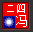
<style>
.page{position:relative;width:33px;height:32px;background:#f20000}
.page>*{position:absolute;margin:0}
.t1{font:10.4px "SimSun";color:#ffffff}
.t2{font:11.7px "SimSun";color:#ffffff}
</style>
<div class="page">
<p class="t1" style="left:7px;top:4px;width:18px;height:9px">二四</p>
<p class="t2" style="left:16px;top:15px;width:11px;height:12px">冯</p>
</div>
